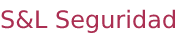
<style>
.page{position:relative;width:180px;height:40px;background:#ffffff}
.page>*{position:absolute;margin:0}
.t1{font:24px "DejaVuSans";color:#ab2f52}
</style>
<div class="page">
<p class="t1" style="left:1px;top:9px;width:174px;height:24px">S&amp;L Seguridad</p>
</div>
